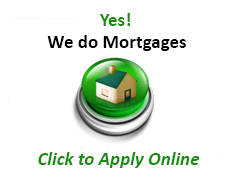
<style>
.page{position:relative;width:232px;height:192px;background:#ffffff}
.page>*{position:absolute;margin:0}
.t1{font:19px/22px "Calibri-Bold";color:#000000}
.t2{font:19px/22px "Calibri-Bold";color:#198c0f}
.t3{font:19px "Calibri-BoldItalic";color:#198c0f}
</style>
<div class="page">
<p class="t1" style="left:47px;top:13px;width:139px;height:38px;text-align:center"><span class="t2">Yes!<br></span>We do Mortgages</p>
<p class="t3" style="left:38px;top:152px;width:162px;height:16px">Click to Apply Online</p>
</div>
